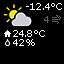
<style>
.page{position:relative;width:64px;height:64px;background:#000000}
.page>*{position:absolute;margin:0}
.t1{font:10px "Verdana";color:#ffffff}
.t2{font:10px "Verdana";letter-spacing:-0.08em;color:#ffffff}
.t3{font:10px "Verdana";letter-spacing:-0.08em;color:#636363}
</style>
<div class="page">
<p class="t1" style="left:26px;top:3px;width:36px;height:7px"><span class="t2">-</span>12.4 °C</p>
<p class="t3" style="left:44px;top:16px;width:5px;height:7px">4</p>
<p class="t1" style="left:13px;top:30px;width:32px;height:7px"><span class="t2">24</span>.8 °C</p>
<p class="t1" style="left:13px;top:39px;width:22px;height:7px">42%</p>
</div>
